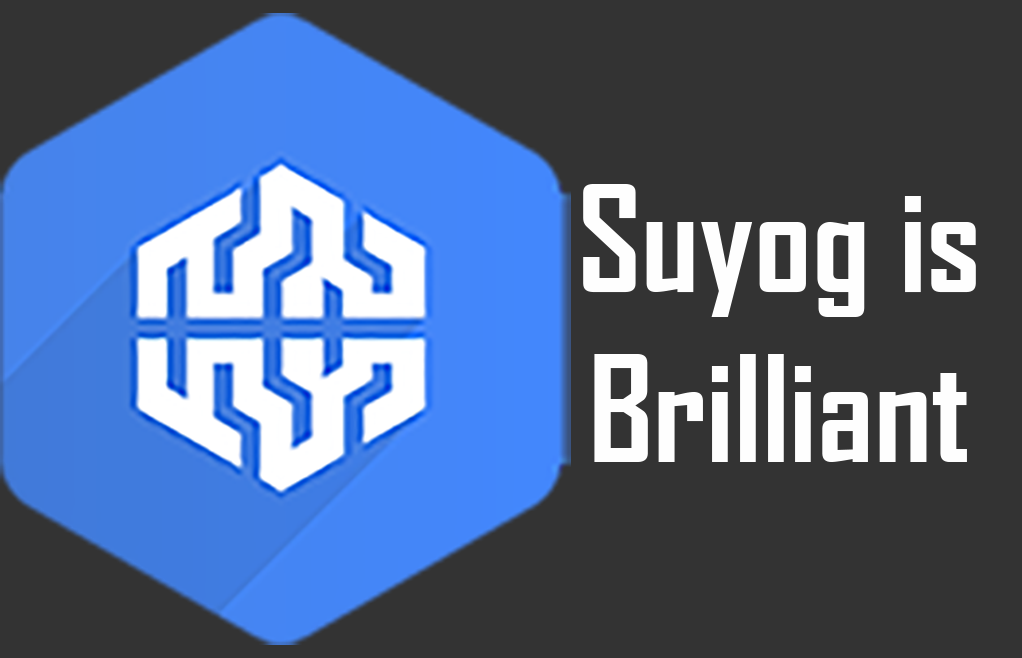
<style>
.page{position:relative;width:1022px;height:658px;background:#333333}
.page>*{position:absolute;margin:0}
.t1{font:141px "AgencyFB-Bold";color:#fefefe}
</style>
<div class="page">
<p class="t1" style="left:583px;top:184px;width:393px;height:278px;text-align:center">Suyog is<br>Brilliant</p>
</div>
